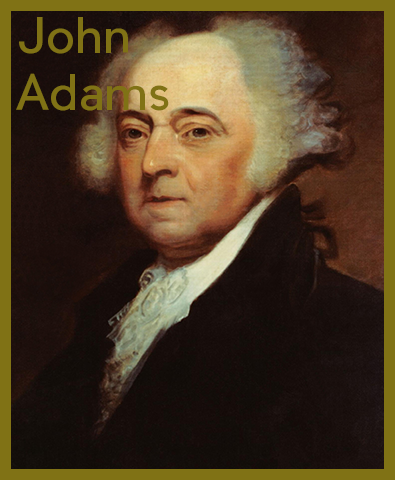
<style>
.page{position:relative;width:395px;height:480px}
.page>*{position:absolute;margin:0}
.t1{font:48px "PierSans";color:#807215}
</style>
<div class="page">
<p class="t1" style="left:16px;top:17px;width:153px;height:94px">John<br>Adams</p>
</div>
